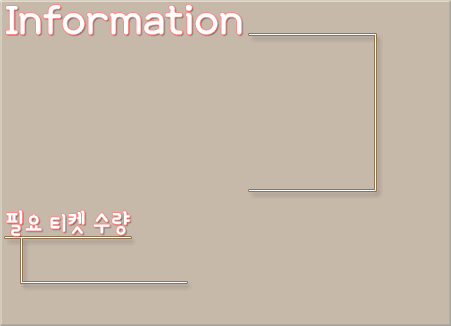
<style>
.page{position:relative;width:451px;height:326px;background:#c6b9aa}
.page>*{position:absolute;margin:0}
.t1{font:50px "YanoljaYacheR";color:#ffffff}
.t2{font:30px "YanoljaYacheR";color:#ffffff}
</style>
<div class="page">
<p class="t1" style="left:6px;top:4px;width:236px;height:31px">Information</p>
<p class="t2" style="left:6px;top:210px;width:124px;height:26px">필요 티켓 수량</p>
</div>
